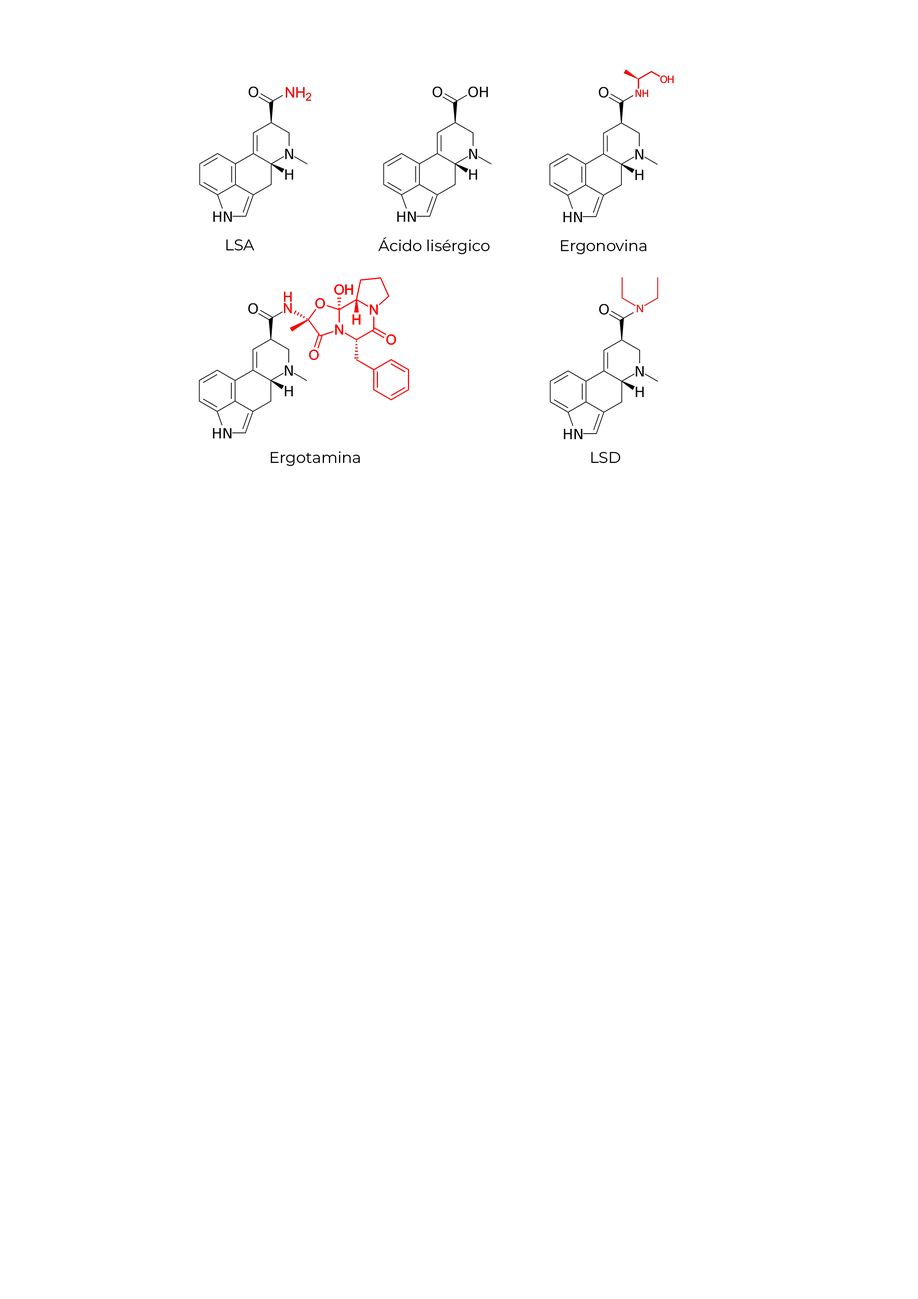
<style>
.page{position:relative;width:918px;height:1299px;background:#ffffff}
.page>*{position:absolute;margin:0}
.t1{font:15.4px "MontserratRoman-Regular";color:#000000}
</style>
<div class="page">
<p class="t1" style="left:226px;top:239px;width:28px;height:12px">LSA</p>
<p class="t1" style="left:378px;top:237px;width:112px;height:17px">Ácido lisérgico</p>
<p class="t1" style="left:561px;top:239px;width:85px;height:15px">Ergonovina</p>
<p class="t1" style="left:271px;top:451px;width:89px;height:15px">Ergotamina</p>
<p class="t1" style="left:591px;top:452px;width:29px;height:11px">LSD</p>
</div>
